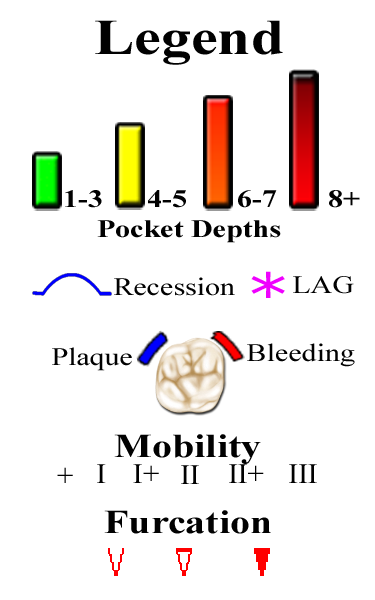
<style>
.page{position:relative;width:375px;height:600px;background:#ffffff}
.page>*{position:absolute;margin:0}
.t1{font:50px "TimesNewRomanPS-BoldMT";color:#010101;scale:1.2 1}
.t2{font:25px "TimesNewRomanPS-BoldMT";color:#010101;scale:1.2 1}
.t3{font:25px "TimesNewRomanPSMT";color:#010101;scale:1.2 1}
.t4{font:58.3px "MSReferenceSansSerif";color:#ef01fe;scale:1.2 1}
.t5{font:33.3px "TimesNewRomanPS-BoldMT";color:#010101;scale:1.2 1}
</style>
<div class="page">
<p class="t1" style="left:95px;top:20px;width:188px;height:45px">Legend</p>
<p class="t2" style="left:65px;top:190px;width:37px;height:18px">1-3</p>
<p class="t2" style="left:148px;top:190px;width:38px;height:18px">4-5</p>
<p class="t2" style="left:238px;top:190px;width:39px;height:18px">6-7</p>
<p class="t2" style="left:329px;top:190px;width:31px;height:18px">8+</p>
<p class="t2" style="left:97px;top:220px;width:184px;height:23px">Pocket Depths</p>
<p class="t3" style="left:114px;top:277px;width:121px;height:19px">Recession</p>
<p class="t4" style="left:251px;top:271px;width:34px;height:27px">*</p>
<p class="t3" style="left:293px;top:276px;width:61px;height:18px">LAG</p>
<p class="t3" style="left:52px;top:347px;width:80px;height:24px">Plaque</p>
<p class="t3" style="left:247px;top:343px;width:108px;height:24px">Bleeding</p>
<p class="t5" style="left:114px;top:434px;width:147px;height:30px">Mobility</p>
<p class="t5" style="left:104px;top:510px;width:167px;height:24px">Furcation</p>
</div>
